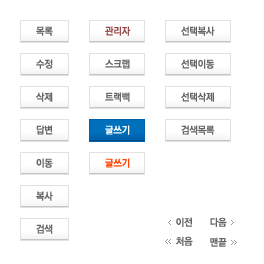
<style>
.page{position:relative;width:264px;height:264px;background:#ffffff}
.page>*{position:absolute;margin:0}
.t1{font:10px "YGO540";letter-spacing:-0.025em;color:#666666;scale:0.95 1}
.t2{font:10px "YGO540";letter-spacing:-0.025em;color:#974c4c;scale:0.95 1}
.t3{font:10px "YGO540";letter-spacing:-0.025em;color:#ffffff;scale:0.95 1}
.t4{font:10px "YGO540";letter-spacing:-0.025em;color:#ff4200;scale:0.95 1}
</style>
<div class="page">
<p class="t1" style="left:36px;top:26px;width:17px;height:10px">목록</p>
<p class="t2" style="left:105px;top:26px;width:26px;height:10px">관리자</p>
<p class="t1" style="left:181px;top:26px;width:34px;height:10px">선택복사</p>
<p class="t1" style="left:36px;top:59px;width:17px;height:10px">수정</p>
<p class="t1" style="left:105px;top:59px;width:25px;height:10px">스크랩</p>
<p class="t1" style="left:181px;top:59px;width:34px;height:10px">선택이동</p>
<p class="t1" style="left:36px;top:92px;width:17px;height:10px">삭제</p>
<p class="t1" style="left:105px;top:92px;width:25px;height:10px">트랙백</p>
<p class="t1" style="left:181px;top:92px;width:33px;height:10px">선택삭제</p>
<p class="t1" style="left:36px;top:125px;width:17px;height:10px">답변</p>
<p class="t3" style="left:105px;top:125px;width:25px;height:10px">글쓰기</p>
<p class="t1" style="left:181px;top:125px;width:34px;height:10px">검색목록</p>
<p class="t1" style="left:36px;top:158px;width:17px;height:10px">이동</p>
<p class="t4" style="left:105px;top:158px;width:25px;height:10px">글쓰기</p>
<p class="t1" style="left:36px;top:191px;width:17px;height:10px">복사</p>
<p class="t1" style="left:176px;top:217px;width:16px;height:10px">이전</p>
<p class="t1" style="left:210px;top:217px;width:17px;height:10px">다음</p>
<p class="t1" style="left:36px;top:224px;width:17px;height:10px">검색</p>
<p class="t1" style="left:176px;top:236px;width:17px;height:10px">처음</p>
<p class="t1" style="left:210px;top:237px;width:17px;height:10px">맨끝</p>
</div>
